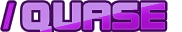
<style>
.page{position:relative;width:182px;height:32px}
.page>*{position:absolute;margin:0}
.t1{font:41.3px "DFSoGeiStd-W9";letter-spacing:-0.03em;font-weight:bold;scale:0.96 1}
</style>
<div class="page">
<p class="t1" style="left:22px;top:2px;width:143px;height:32px">QUASE</p>
<p class="t1" style="left:22px;top:2px;width:143px;height:32px">QUASE</p>
</div>
